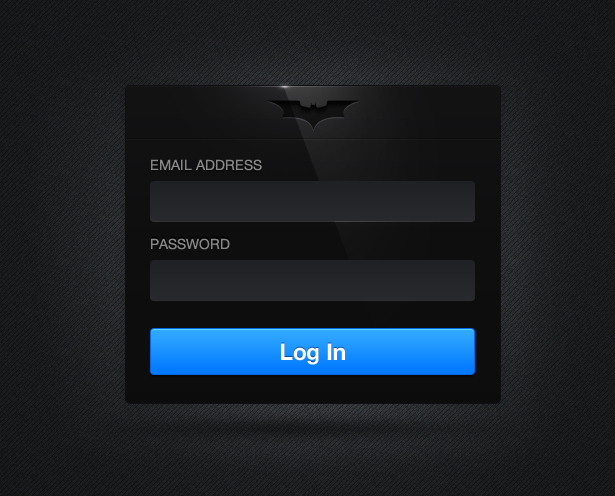
<style>
.page{position:relative;width:615px;height:496px}
.page>*{position:absolute;margin:0}
.t1{font:14px "HelveticaNeue-Roman";color:#878787;text-transform:uppercase}
.t2{font:23px "HelveticaNeue-Bold";color:#ffffff}
</style>
<div class="page">
<p class="t1" style="left:151px;top:159px;width:111px;height:12px">Email Address</p>
<p class="t1" style="left:151px;top:238px;width:79px;height:12px">Password</p>
<p class="t2" style="left:281px;top:343px;width:64px;height:22px">Log In</p>
</div>
